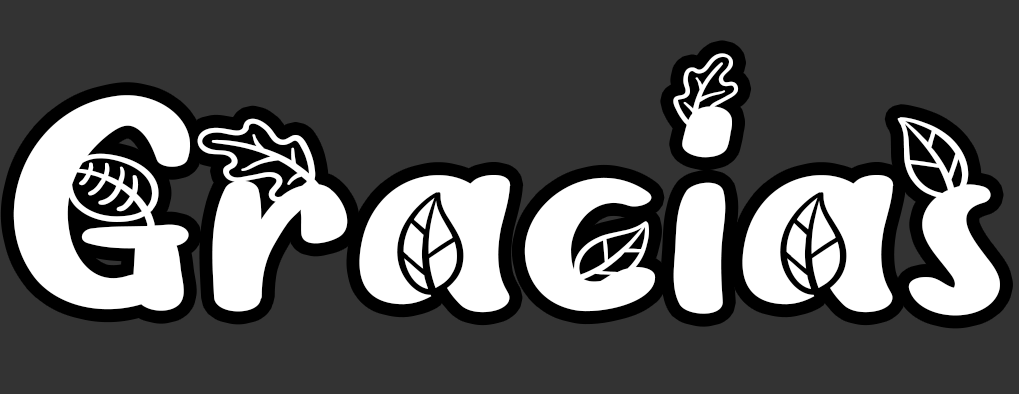
<style>
.page{position:relative;width:1019px;height:394px;background:#333333}
.page>*{position:absolute;margin:0}
.t1{font:316.2px "CandreevaFREE";color:#ffffff;scale:1.17 1}
</style>
<div class="page">
<p class="t1" style="left:13px;top:53px;width:987px;height:263px">Gracias</p>
</div>
